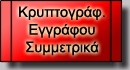
<style>
.page{position:relative;width:130px;height:70px}
.page>*{position:absolute;margin:0}
.t1{font:14.7px "ArialMT";color:#000000}
</style>
<div class="page">
<p class="t1" style="left:19px;top:6px;width:86px;height:50px;text-align:center">Κρυπτογράφ.<br>Εγγράφου<br>Συμμετρικά</p>
</div>
